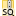
<style>
.page{position:relative;width:16px;height:16px;background:#ffffff}
.page>*{position:absolute;margin:0}
.t1{font:10px "Calibri";color:#1d1d19}
</style>
<div class="page">
<p class="t1" style="left:2px;top:9px;width:12px;height:7px">SQ</p>
</div>
